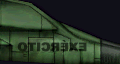
<style>
.page{position:relative;width:120px;height:64px;background:#101018}
.page>*{position:absolute;margin:0}
.t1{font:12px "Arial-Black";color:#1c2b19;text-transform:uppercase;font-weight:bold}
</style>
<div class="page">
<p class="t1" style="left:17px;top:40px;width:70px;height:12px;rotate:180deg">EXÉRCITO</p>
</div>
